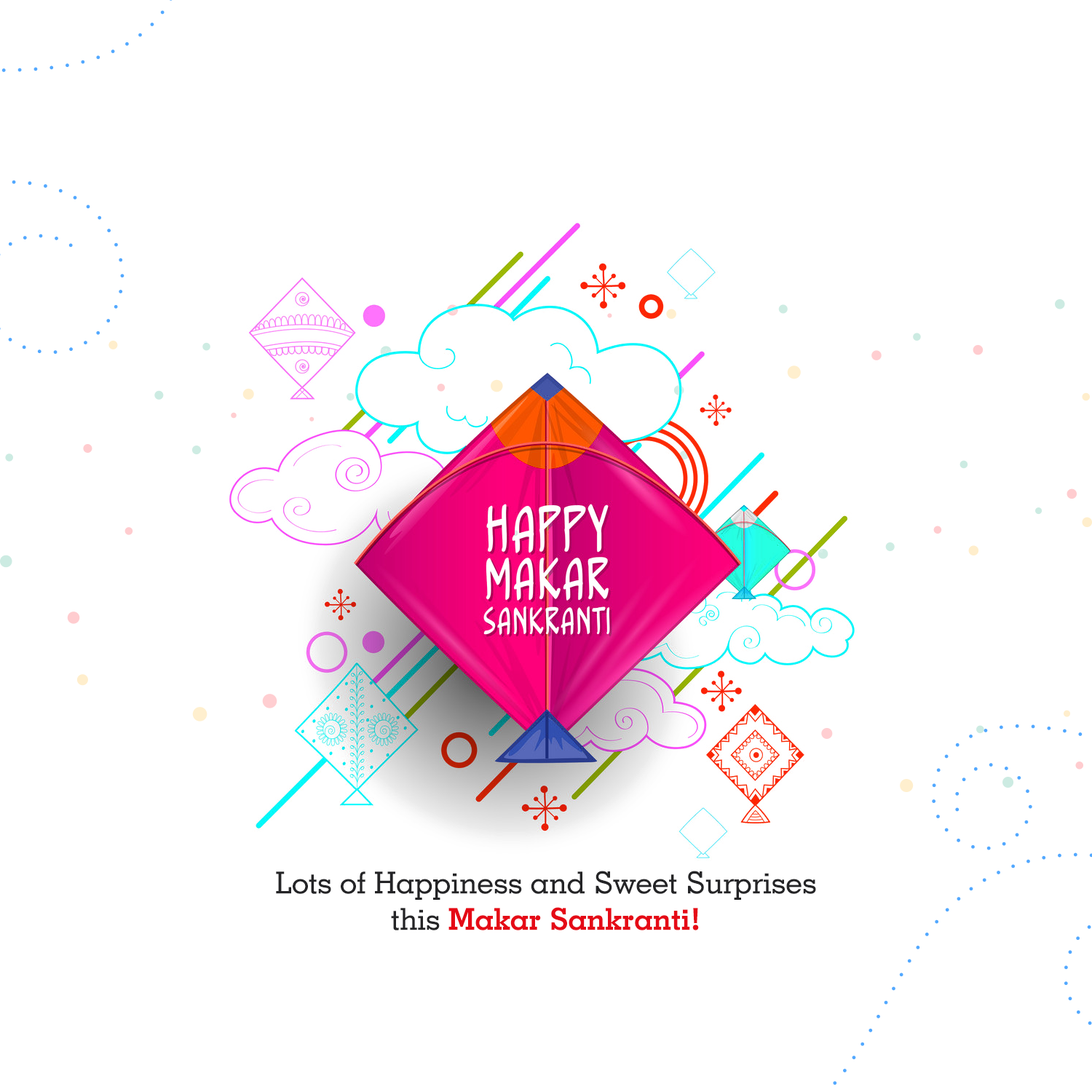
<style>
.page{position:relative;width:1092px;height:1092px;background:#ffffff}
.page>*{position:absolute;margin:0}
.t1{font:30.3px "GeometricSlab703BT-Medium";color:#242426}
.t2{font:30.3px "GeometricSlab703BT-Bold";color:#e50a16}
</style>
<div class="page">
<p class="t1" style="left:276px;top:871px;width:540px;height:59px;text-align:center">Lots of Happiness and Sweet Surprises<br>this <span class="t2">Makar Sankranti!</span></p>
</div>
